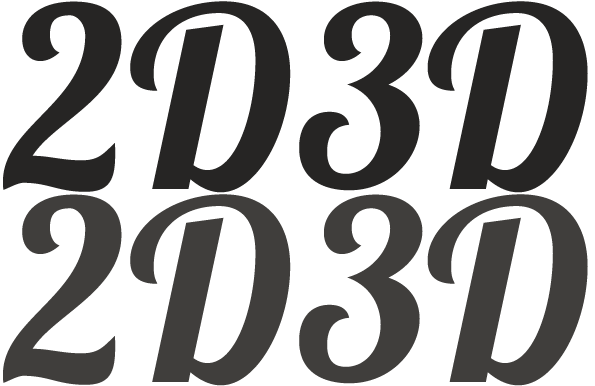
<style>
.page{position:relative;width:595px;height:386px;background:#ffffff}
.page>*{position:absolute;margin:0}
.t1{font:250px "Lobster1.4";color:#262524}
.t2{font:250px "Lobster1.4";color:#403e3c}
</style>
<div class="page">
<p class="t1" style="left:3px;top:1px;width:288px;height:192px">2D</p>
<p class="t1" style="left:299px;top:1px;width:289px;height:192px">3D</p>
<p class="t2" style="left:3px;top:194px;width:288px;height:192px">2D</p>
<p class="t2" style="left:299px;top:194px;width:289px;height:192px">3D</p>
</div>
